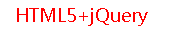
<style>
.page{position:relative;width:170px;height:30px;background:#ffffff}
.page>*{position:absolute;margin:0}
.t1{font:18px "MicrosoftYaHei";color:#ff0000}
</style>
<div class="page">
<p class="t1" style="left:17px;top:8px;width:131px;height:18px">HTML5+jQuery</p>
</div>
